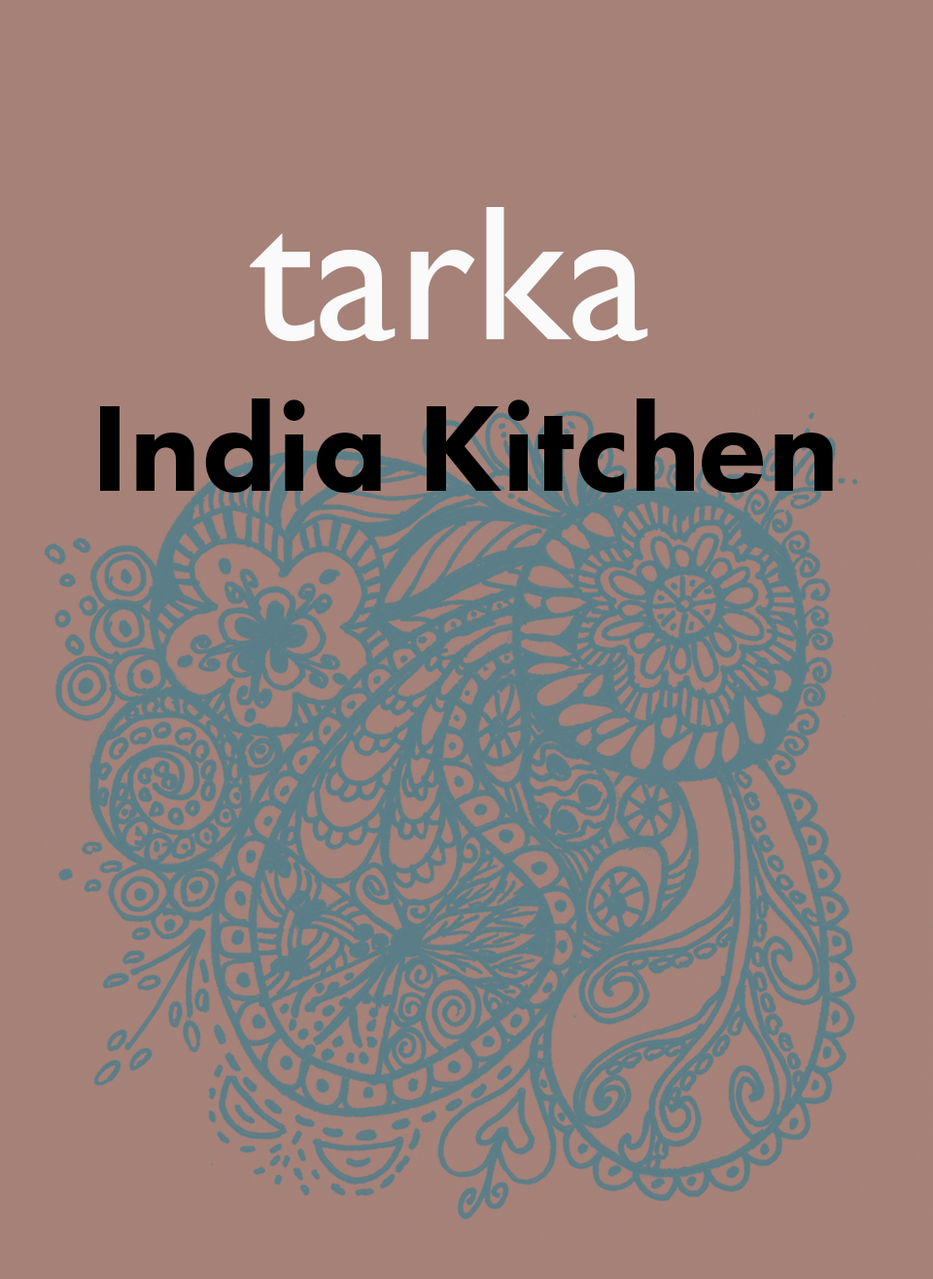
<style>
.page{position:relative;width:933px;height:1279px;background:#a68178}
.page>*{position:absolute;margin:0}
.t1{font:126.3px "FuturaPT-Heavy";color:#000000}
.t2{font:194.3px "GillSans";color:#fafafa}
</style>
<div class="page">
<p class="t1" style="left:100px;top:207px;width:733px;height:287px;text-align:center"><span class="t2">tarka <br></span>India Kitchen</p>
</div>
